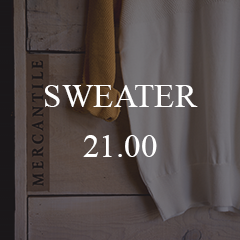
<style>
.page{position:relative;width:240px;height:240px}
.page>*{position:absolute;margin:0}
.t1{font:33.3px/50px "TimesNewRomanPSMT";color:#ffffff}
</style>
<div class="page">
<p class="t1" style="left:45px;top:85px;width:153px;height:72px;text-align:center">SWEATER<br>21.00</p>
</div>
